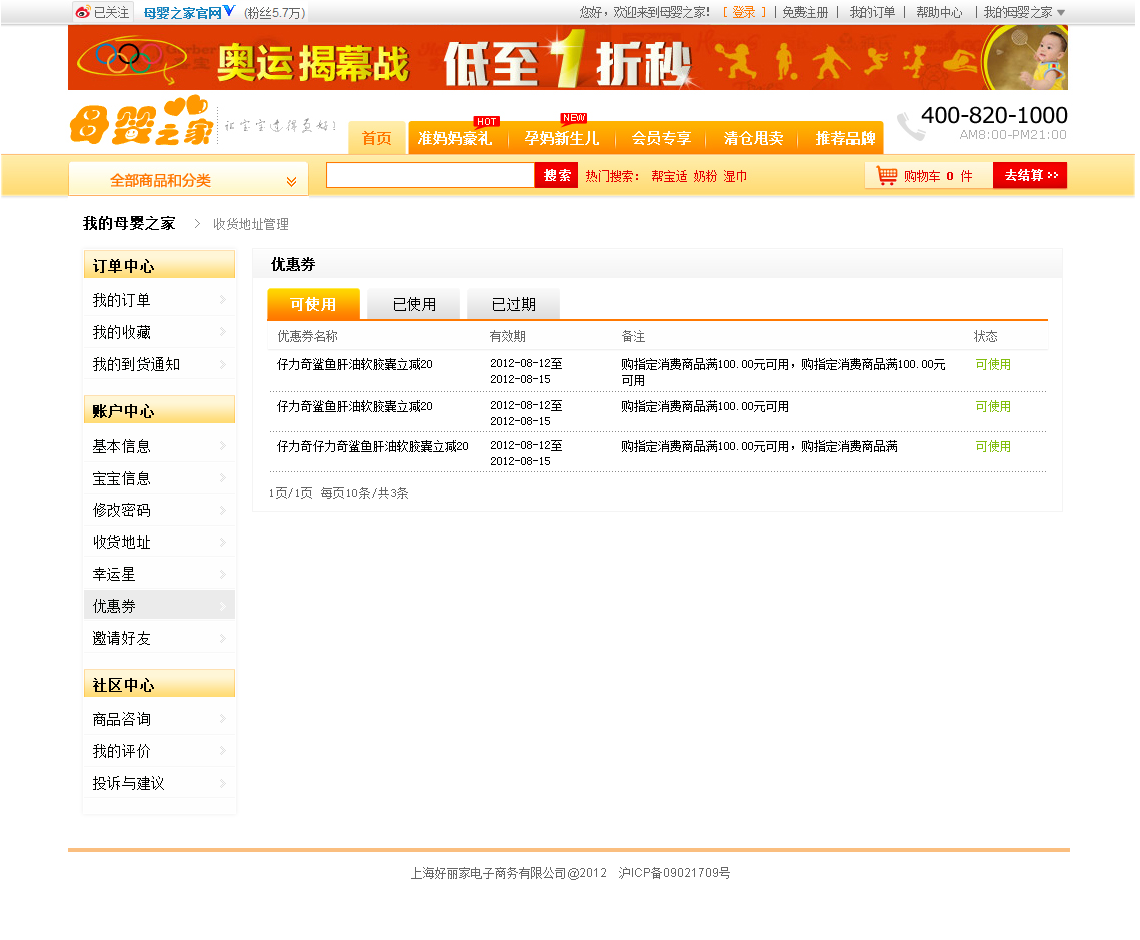
<style>
.page{position:relative;width:1140px;height:940px;background:#ffffff}
.page>*{position:absolute;margin:0}
.t1{font:12px "SimSun";letter-spacing:0.05em;color:#898989}
.t2{font:14px "SimSun";letter-spacing:0.05em;color:#000000;font-weight:bold}
.t3{font:14px "SimSun";color:#000000;font-weight:bold}
.t4{font:14px/32px "SimSun";letter-spacing:0.05em;color:#020300}
.t5{font:14px "SimSun";letter-spacing:0.05em;color:#ffffff;font-weight:bold}
.t6{font:14px "SimSun";letter-spacing:0.05em;color:#000000}
.t7{font:12px "SimSun";color:#666666}
.t8{font:12px "SimSun";color:#000000}
.t9{font:12px "SimSun";color:#82be0e}
.t10{font:12px/16px "SimSun";color:#000000}
.t11{font:14px "SimSun";letter-spacing:0.05em;color:#020300;font-weight:bold}
.t12{font:12px "SimSun";letter-spacing:0.05em;color:#666666}
.t13{font:12px "ArialMT";color:#666666}
</style>
<div class="page">
<p class="t1" style="left:83px;top:216px;width:205px;height:14px"><span class="t2">我的母婴之家  </span>&gt;  收货地址管理</p>
<p class="t3" style="left:271px;top:257px;width:44px;height:14px">优惠券</p>
<p class="t2" style="left:93px;top:259px;width:61px;height:14px">订单中心</p>
<p class="t4" style="left:93px;top:293px;width:86px;height:78px">我的订单<br>我的收藏<br>我的到货通知</p>
<p class="t5" style="left:290px;top:297px;width:45px;height:14px">可使用</p>
<p class="t6" style="left:394px;top:297px;width:141px;height:14px">已使用      已过期</p>
<p class="t7" style="left:278px;top:330px;width:719px;height:12px">优惠券名称           有效期                备注                                     状态</p>
<p class="t8" style="left:277px;top:358px;width:733px;height:12px">仔力奇鲨鱼肝油软胶囊立减20                                               <span class="t9">可使用</span></p>
<p class="t10" style="left:491px;top:358px;width:71px;height:25px">2012-08-12至<br>2012-08-15</p>
<p class="t10" style="left:622px;top:358px;width:323px;height:28px">购指定消费商品满100.00元可用，购指定消费商品满100.00元<br>可用</p>
<p class="t8" style="left:277px;top:400px;width:733px;height:12px">仔力奇鲨鱼肝油软胶囊立减20                                               <span class="t9">可使用</span></p>
<p class="t10" style="left:491px;top:400px;width:71px;height:25px">2012-08-12至<br>2012-08-15</p>
<p class="t8" style="left:622px;top:400px;width:166px;height:12px">购指定消费商品满100.00元可用</p>
<p class="t11" style="left:93px;top:404px;width:61px;height:14px">账户中心</p>
<p class="t4" style="left:93px;top:439px;width:57px;height:206px">基本信息<br>宝宝信息<br>修改密码<br>收货地址<br>幸运星<br>优惠券<br>邀请好友</p>
<p class="t8" style="left:277px;top:440px;width:733px;height:12px">仔力奇仔力奇鲨鱼肝油软胶囊立减20                                              <span class="t9">可使用</span></p>
<p class="t10" style="left:491px;top:440px;width:71px;height:25px">2012-08-12至<br>2012-08-15</p>
<p class="t8" style="left:622px;top:440px;width:275px;height:12px">购指定消费商品满100.00元可用，购指定消费商品满</p>
<p class="t12" style="left:270px;top:487px;width:138px;height:12px">1页/1页 每页10条/共3条</p>
<p class="t2" style="left:93px;top:678px;width:61px;height:14px">社区中心</p>
<p class="t4" style="left:93px;top:712px;width:71px;height:78px">商品咨询<br>我的评价<br>投诉与建议</p>
<p class="t7" style="left:411px;top:867px;width:319px;height:13px">上海好丽家电子商务有限公司<span class="t13">@2012    </span>沪<span class="t13">ICP</span>备<span class="t13">09021709</span>号</p>
</div>
